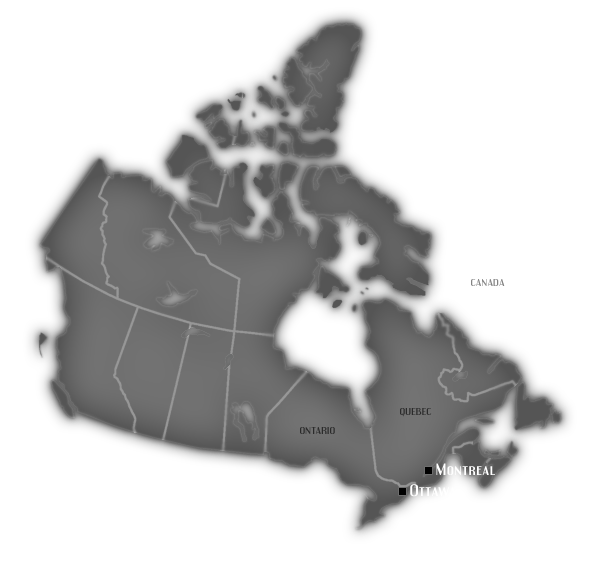
<style>
.page{position:relative;width:600px;height:565px;background:#ffffff}
.page>*{position:absolute;margin:0}
.t1{font:8.8px "Engebrechtre";letter-spacing:0.05em;color:#838383;scale:1.25 1}
.t2{font:8.8px "Engebrechtre";letter-spacing:0.05em;color:#424242;scale:1.25 1}
.t3{font:14.4px "Engebrechtre";letter-spacing:0.05em;color:#ffffff;scale:1.25 1}
</style>
<div class="page">
<p class="t1" style="left:471px;top:279px;width:34px;height:7px">CANADA</p>
<p class="t2" style="left:400px;top:408px;width:32px;height:9px">QUEBEC</p>
<p class="t2" style="left:300px;top:427px;width:35px;height:7px">ONTARIO</p>
<p class="t3" style="left:436px;top:463px;width:59px;height:12px">Montreal</p>
<p class="t3" style="left:410px;top:484px;width:46px;height:13px">Ottawa</p>
</div>
